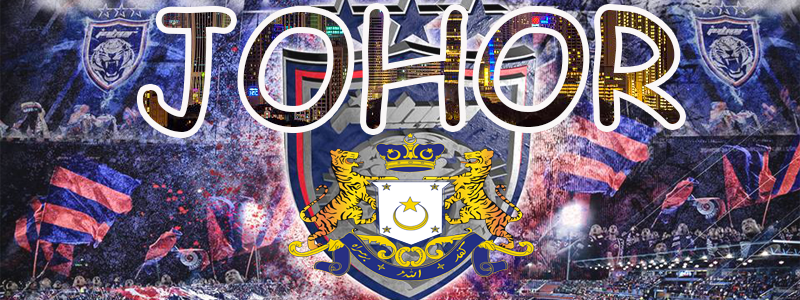
<style>
.page{position:relative;width:800px;height:300px}
.page>*{position:absolute;margin:0}
.t1{font:150px "ComicSansMS"}
</style>
<div class="page">
<p class="t1" style="left:142px;top:9px;width:538px;height:123px">JOHOR</p>
</div>
